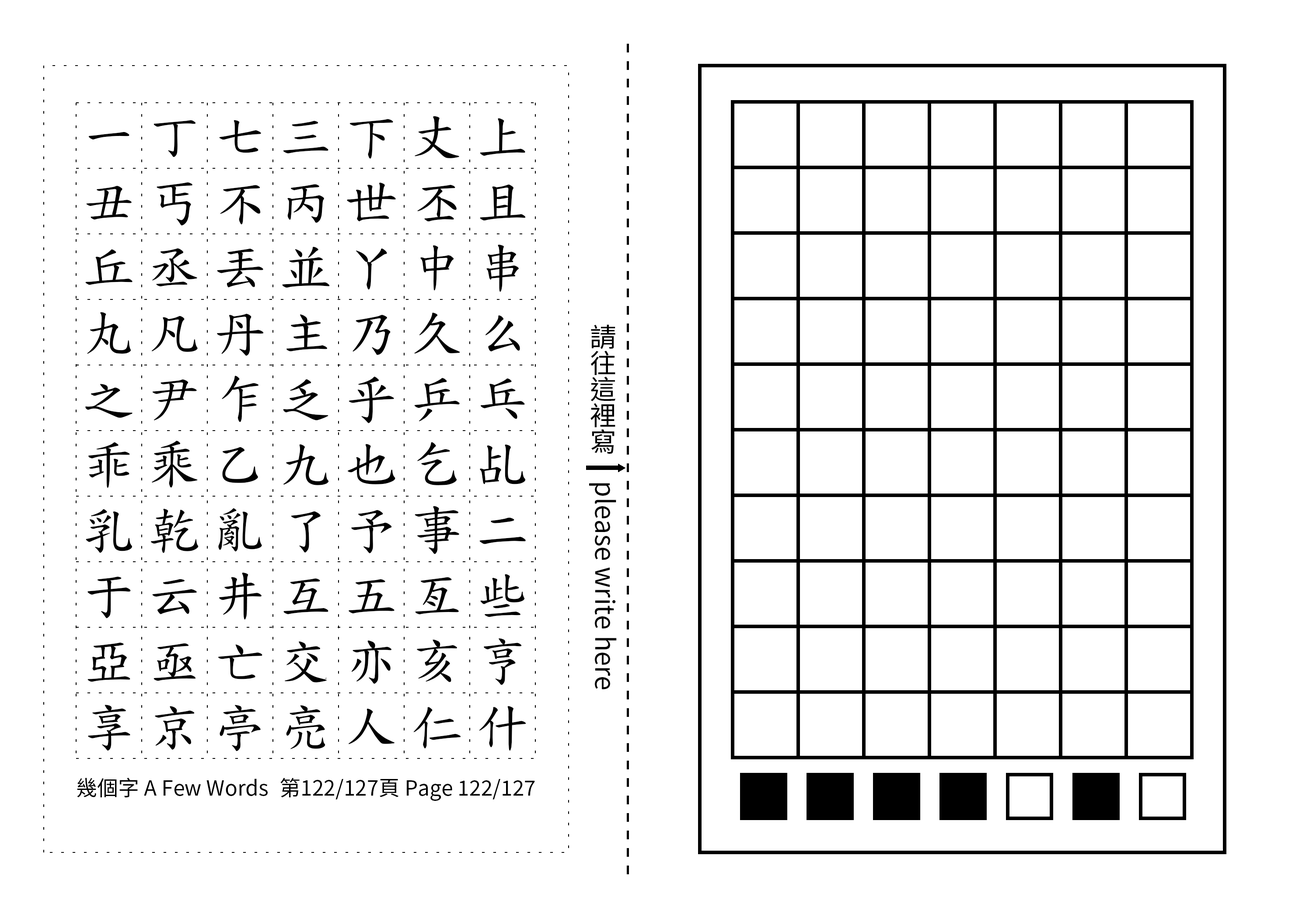
<style>
.page{position:relative;width:1299px;height:918px;background:#ffffff}
.page>*{position:absolute;margin:0}
.t1{font:52.5px/65.6px "TW-Kai-98_1";letter-spacing:0.25em;color:#000000}
.t2{font:26.2px "SourceHanSansTC-Regular";color:#000000}
.t3{font:21px "SourceHanSansTC-Regular";color:#000000}
</style>
<div class="page">
<p class="t1" style="left:85px;top:116px;width:441px;height:636px;text-align:center">一丁七三下丈上丑丐不丙世丕且丘丞丟並丫中串丸凡丹主乃久么之尹乍乏乎乒乓乖乘乙九也乞乩乳乾亂了予事二于云井互五亙些亞亟亡交亦亥亨享京亭亮人仁什</p>
<p class="t2" style="left:589px;top:324px;width:28px;height:366px;text-align:center">請往這裡寫　please write here</p>
<p class="t3" style="left:77px;top:778px;width:191px;height:20px">幾個字 A Few Words</p>
<p class="t3" style="left:280px;top:778px;width:255px;height:23px">第122/127頁 Page 122/127</p>
</div>
